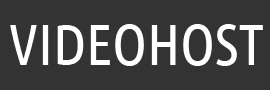
<style>
.page{position:relative;width:270px;height:90px;background:#333333}
.page>*{position:absolute;margin:0}
.t1{font:58px "UbuntuCondensed-Regular";color:#ffffff}
</style>
<div class="page">
<p class="t1" style="left:10px;top:24px;width:253px;height:42px">VIDEOHOST</p>
</div>
